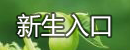
<style>
.page{position:relative;width:130px;height:50px}
.page>*{position:absolute;margin:0}
.t1{font:24px "MicrosoftYaHei";color:#ffffff}
</style>
<div class="page">
<p class="t1" style="left:17px;top:14px;width:94px;height:23px">新生入口</p>
</div>
